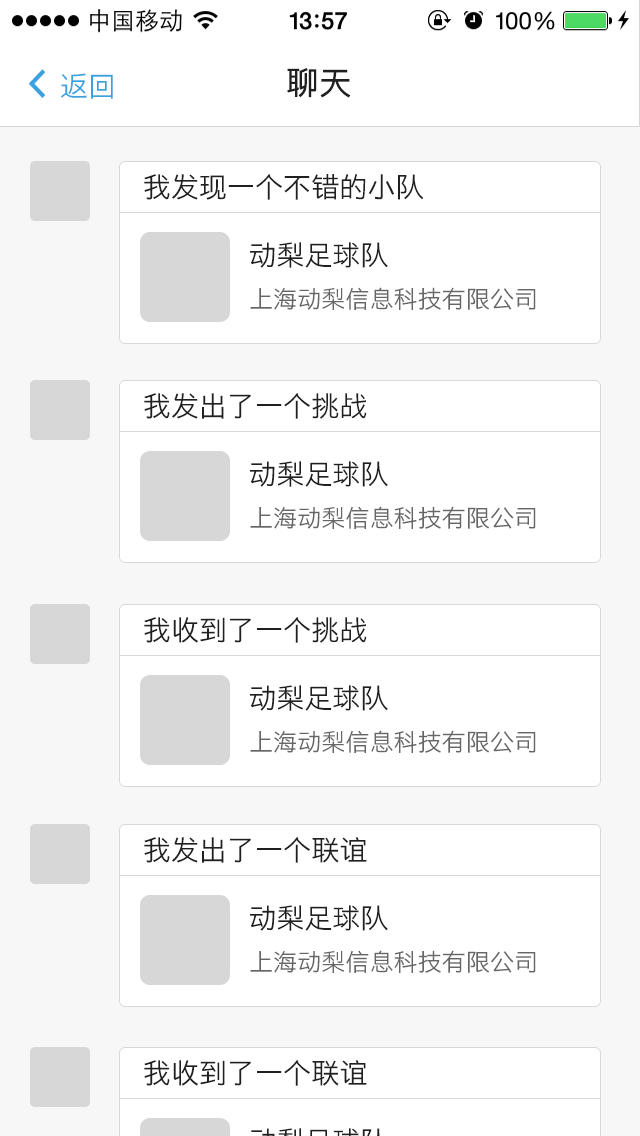
<style>
.page{position:relative;width:640px;height:1136px;background:#ffffff}
.page>*{position:absolute;margin:0}
.t1{font:28px "STHeitiSC-Light";color:#3ba2e0}
.t2{font:32px "STHeitiSC-Light";color:#202020;font-weight:bold}
.t3{font:28px "STHeitiSC-Light";color:#202020}
.t4{font:27.8px "STHeitiSC-Light";color:#202020}
.t5{font:24px "STHeitiSC-Light";color:#666666}
</style>
<div class="page">
<p class="t1" style="left:60px;top:73px;width:53px;height:26px">返回</p>
<p class="t2" style="left:287px;top:68px;width:64px;height:30px">聊天</p>
<p class="t3" style="left:144px;top:174px;width:280px;height:26px">我发现一个不错的小队</p>
<p class="t4" style="left:250px;top:242px;width:138px;height:26px">动梨足球队</p>
<p class="t5" style="left:250px;top:287px;width:286px;height:23px">上海动梨信息科技有限公司</p>
<p class="t3" style="left:144px;top:393px;width:223px;height:26px">我发出了一个挑战</p>
<p class="t4" style="left:250px;top:461px;width:138px;height:26px">动梨足球队</p>
<p class="t5" style="left:250px;top:506px;width:286px;height:23px">上海动梨信息科技有限公司</p>
<p class="t3" style="left:144px;top:617px;width:223px;height:26px">我收到了一个挑战</p>
<p class="t4" style="left:250px;top:685px;width:138px;height:26px">动梨足球队</p>
<p class="t5" style="left:250px;top:730px;width:286px;height:23px">上海动梨信息科技有限公司</p>
<p class="t3" style="left:144px;top:837px;width:223px;height:26px">我发出了一个联谊</p>
<p class="t4" style="left:250px;top:905px;width:138px;height:26px">动梨足球队</p>
<p class="t5" style="left:250px;top:950px;width:286px;height:23px">上海动梨信息科技有限公司</p>
<p class="t3" style="left:144px;top:1060px;width:223px;height:26px">我收到了一个联谊</p>
</div>
